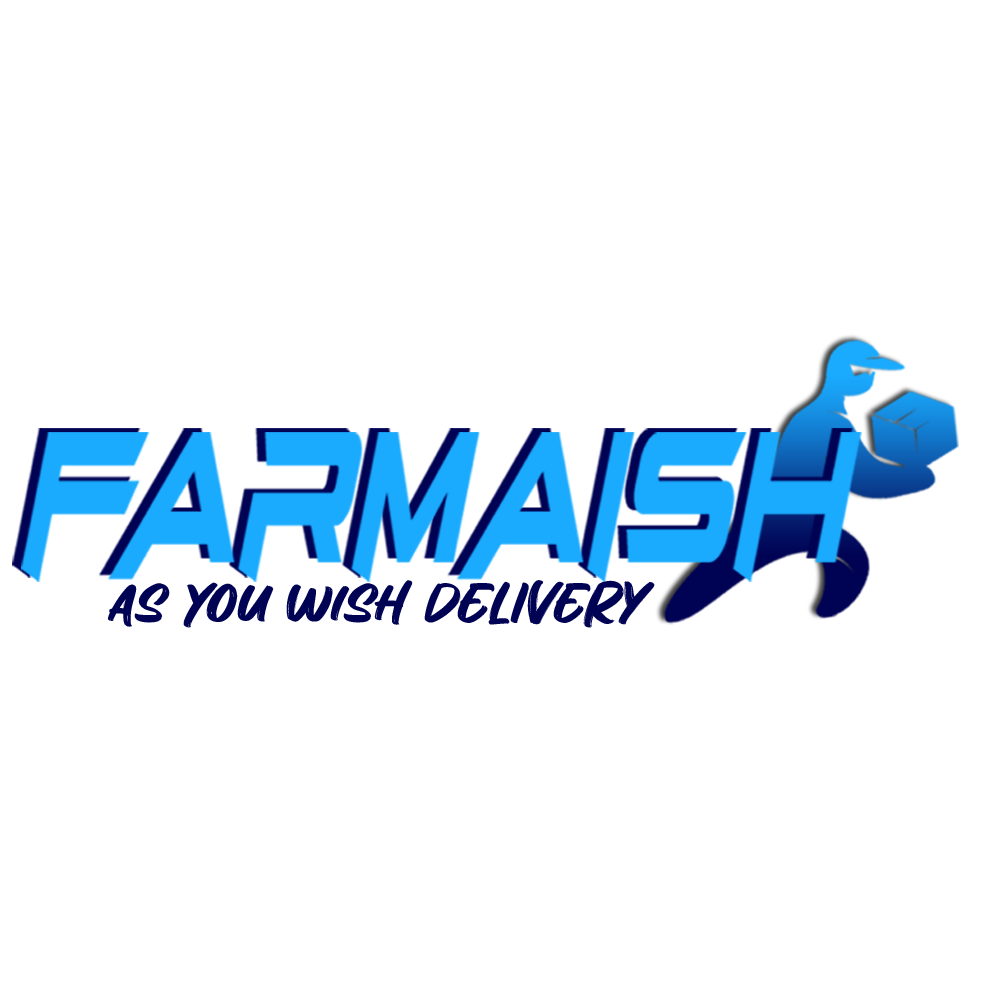
<style>
.page{position:relative;width:1000px;height:1000px;background:#ffffff}
.page>*{position:absolute;margin:0}
.t1{font:63.5px "TheBrownFox-Regular";color:#000253;scale:1.3 1}
</style>
<div class="page">
<p class="t1" style="left:107px;top:580px;width:548px;height:48px">as you wish DELIVERY</p>
</div>
